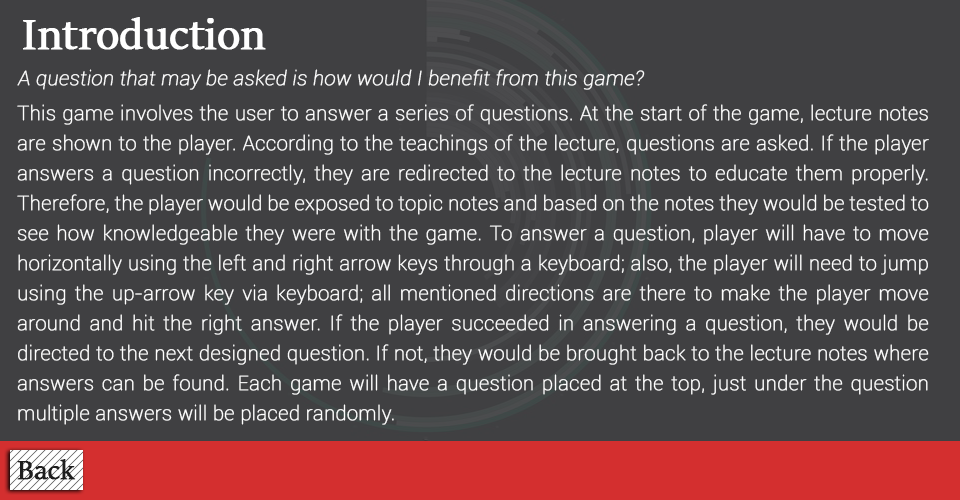
<style>
.page{position:relative;width:960px;height:500px;background:#404042}
.page>*{position:absolute;margin:0}
.t1{font:48px "SitkaBanner";color:#ffffff;font-weight:bold}
.t2{font:20px "Roboto-ThinItalic";color:#ffffff;font-weight:bold}
.t3{font:20px/30px "Roboto-Thin";color:#ffffff;font-weight:bold}
.t4{font:30px "SitkaBanner";color:#1e1e1e;font-weight:bold}
</style>
<div class="page">
<p class="t1" style="left:23px;top:17px;width:243px;height:33px">Introduction</p>
<p class="t2" style="left:17px;top:69px;width:628px;height:21px">A question that may be asked is how would I benefit from this game?</p>
<p class="t3" style="left:17px;top:104px;width:912px;height:321px;text-align:justify">This game involves the user to answer a series of questions. At the start of the game, lecture notes are shown to the player. According to the teachings of the lecture, questions are asked. If the player answers a question incorrectly, they are redirected to the lecture notes to educate them properly. Therefore, the player would be exposed to topic notes and based on the notes they would be tested to see how knowledgeable they were with the game. To answer a question, player will have to move horizontally using the left and right arrow keys through a keyboard; also, the player will need to jump using the up-arrow key via keyboard; all mentioned directions are there to make the player move around and hit the right answer. If the player succeeded in answering a question, they would be directed to the next designed question. If not, they would be brought back to the lecture notes where answers can be found. Each game will have a question placed at the top, just under the question multiple answers will be placed randomly.</p>
<p class="t4" style="left:17px;top:459px;width:59px;height:21px">Back</p>
</div>
